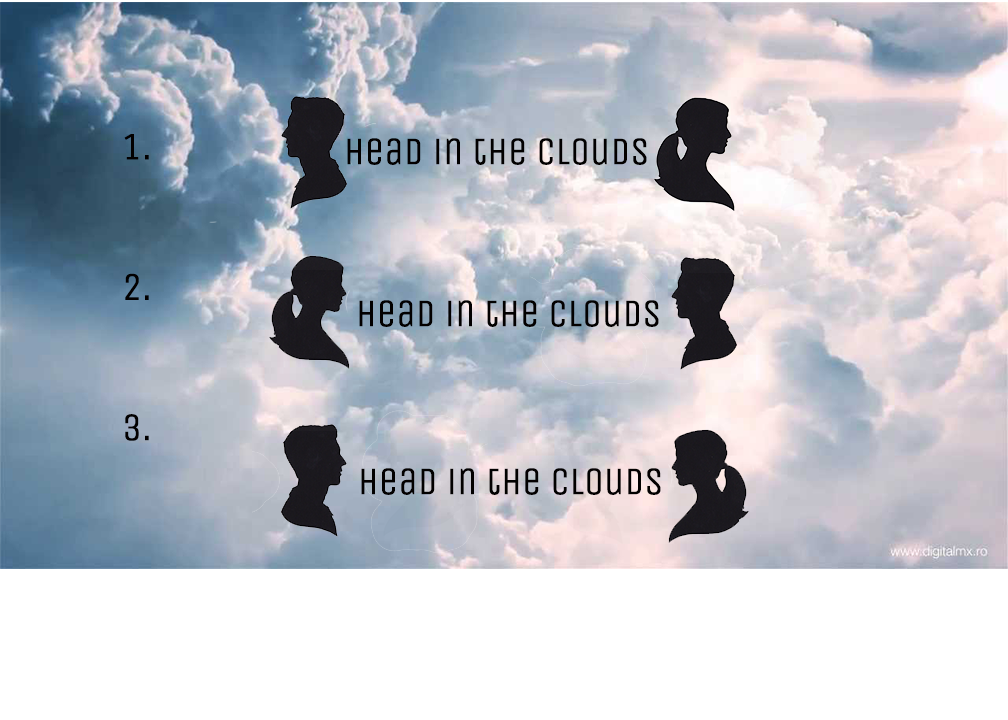
<style>
.page{position:relative;width:1008px;height:720px;background:#ffffff}
.page>*{position:absolute;margin:0}
.t1{font:39px "UnicaOne-Regular";color:#020000}
</style>
<div class="page">
<p class="t1" style="left:124px;top:134px;width:25px;height:307px;text-align:center">1.<br><br><br>2.<br><br><br>3.</p>
<p class="t1" style="left:347px;top:138px;width:300px;height:27px">Head in the Clouds</p>
<p class="t1" style="left:359px;top:300px;width:300px;height:27px">Head in the Clouds</p>
<p class="t1" style="left:361px;top:468px;width:300px;height:27px">Head in the Clouds</p>
</div>
